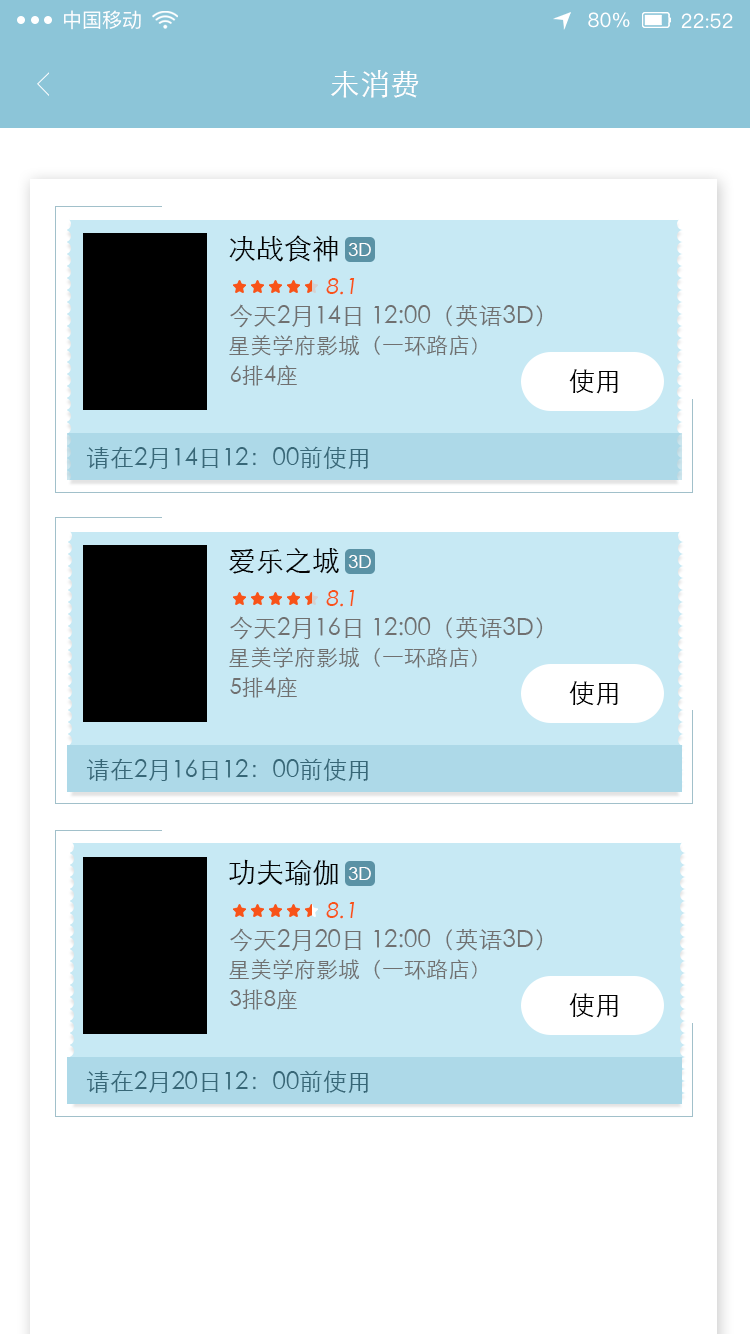
<style>
.page{position:relative;width:750px;height:1334px;background:#ffffff}
.page>*{position:absolute;margin:0}
.t1{font:20px "PingFangSC-Regular";color:#ffffff}
.t2{font:30px "STXihei";color:#fffefe}
.t3{font:28px "STXihei";color:#040404}
.t4{font:18px "STXihei";color:#fffdfd}
.t5{font:22px "STXihei";color:#f85319;scale:1.06 1}
.t6{font:24px "STXihei";color:#707070}
.t7{font:22px "STXihei";color:#707070}
.t8{font:20px "STXihei";color:#707070}
.t9{font:26px "STXihei";color:#000000}
.t10{font:24px "STXihei";color:#386878}
.t11{font:24px "STXihei";color:#376777}
.t12{font:26px "STXihei";color:#020202}
</style>
<div class="page">
<p class="t1" style="left:64px;top:10px;width:77px;height:20px">中国移动</p>
<p class="t1" style="left:588px;top:12px;width:42px;height:16px">80%</p>
<p class="t1" style="left:681px;top:13px;width:52px;height:16px">22:52</p>
<p class="t2" style="left:331px;top:70px;width:88px;height:28px">未消费</p>
<p class="t3" style="left:229px;top:235px;width:109px;height:27px">决战食神</p>
<p class="t4" style="left:348px;top:243px;width:23px;height:13px">3D</p>
<p class="t5" style="left:326px;top:278px;width:29px;height:17px">8.1</p>
<p class="t6" style="left:230px;top:304px;width:313px;height:24px">今天2月14日 12:00（英语3D）</p>
<p class="t7" style="left:229px;top:335px;width:248px;height:21px">星美学府影城（一环路店<span class="t8">）</span></p>
<p class="t7" style="left:230px;top:365px;width:67px;height:21px">6排4座</p>
<p class="t9" style="left:569px;top:369px;width:49px;height:25px">使用</p>
<p class="t10" style="left:86px;top:446px;width:282px;height:23px">请在2月14日12：00前使用</p>
<p class="t3" style="left:229px;top:548px;width:110px;height:26px">爱乐之城</p>
<p class="t4" style="left:348px;top:555px;width:23px;height:13px">3D</p>
<p class="t5" style="left:326px;top:590px;width:29px;height:17px">8.1</p>
<p class="t6" style="left:230px;top:616px;width:313px;height:24px">今天2月16日 12:00（英语3D）</p>
<p class="t7" style="left:229px;top:647px;width:248px;height:21px">星美学府影城（一环路店<span class="t8">）</span></p>
<p class="t7" style="left:230px;top:677px;width:67px;height:21px">5排4座</p>
<p class="t9" style="left:569px;top:681px;width:49px;height:25px">使用</p>
<p class="t11" style="left:86px;top:758px;width:282px;height:23px">请在2月16日12：00前使用</p>
<p class="t3" style="left:229px;top:859px;width:109px;height:27px">功夫瑜伽</p>
<p class="t4" style="left:348px;top:867px;width:23px;height:13px">3D</p>
<p class="t5" style="left:326px;top:902px;width:29px;height:17px">8.1</p>
<p class="t6" style="left:230px;top:928px;width:313px;height:24px">今天2月20日 12:00（英语3D）</p>
<p class="t7" style="left:229px;top:959px;width:248px;height:21px">星美学府影城（一环路店<span class="t8">）</span></p>
<p class="t7" style="left:230px;top:989px;width:67px;height:21px">3排8座</p>
<p class="t12" style="left:569px;top:993px;width:49px;height:25px">使用</p>
<p class="t11" style="left:86px;top:1070px;width:282px;height:23px">请在2月20日12：00前使用</p>
</div>
